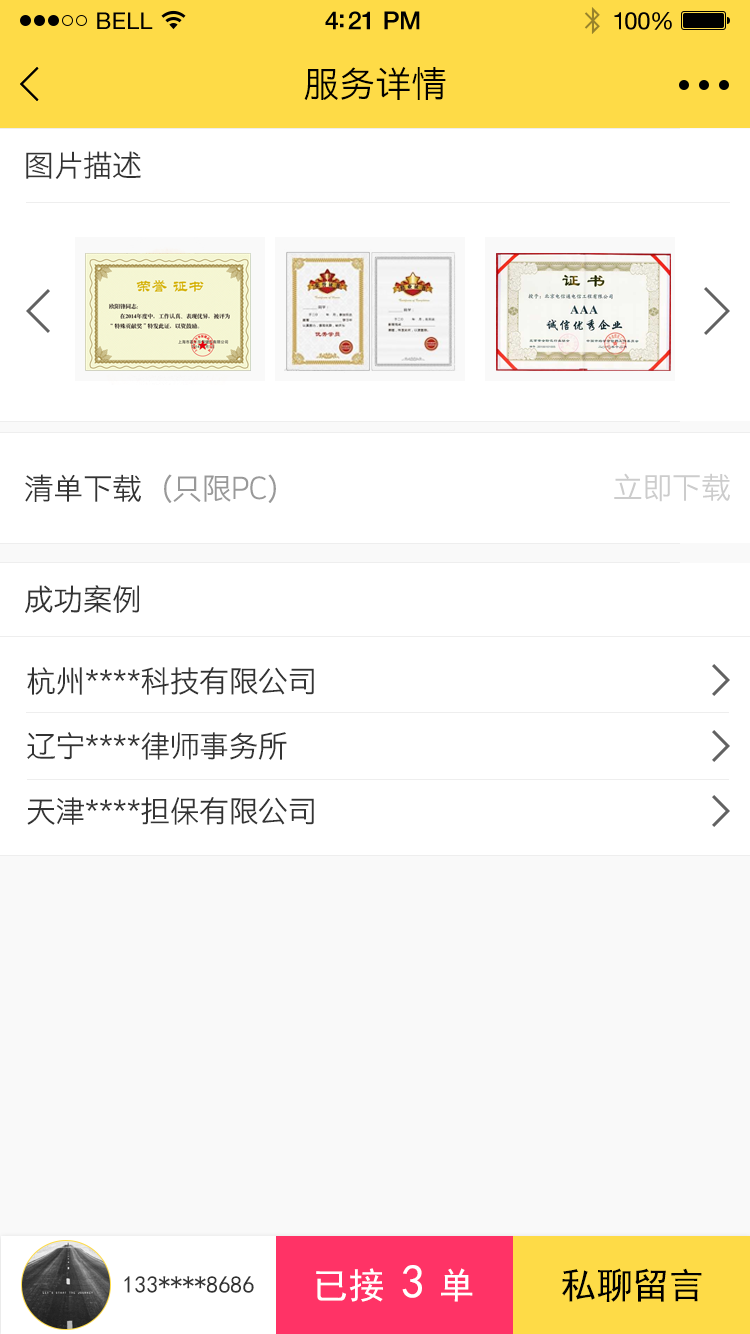
<style>
.page{position:relative;width:750px;height:1334px;background:#ffffff}
.page>*{position:absolute;margin:0}
.t1{font:23px "HelveticaNeue";letter-spacing:0.02em;color:#000000}
.t2{font:25px "HelveticaNeue-Medium";letter-spacing:-0.02em;color:#000000}
.t3{font:24px "HelveticaNeue";letter-spacing:-0.02em;color:#010101}
.t4{font:36px "STHeitiSC-Light";color:#000000}
.t5{font:30px "STHeitiSC-Light";letter-spacing:-0.02em;color:#333333}
.t6{font:30px "STHeitiSC-Light";letter-spacing:-0.02em;color:#cccccc}
.t7{font:30px "STHeitiSC-Light";letter-spacing:-0.02em;color:#999999}
.t8{font:48px "SimHei";color:#ffffff}
.t9{font:24px "SimHei";color:#333333}
.t10{font:36px "SimHei";color:#ffffff}
.t11{font:36px "SimHei";color:#000000}
</style>
<div class="page">
<p class="t1" style="left:97px;top:12px;width:56px;height:17px">BELL</p>
<p class="t1" style="left:97px;top:12px;width:56px;height:17px">BELL</p>
<p class="t2" style="left:325px;top:11px;width:95px;height:19px">4:21 PM</p>
<p class="t2" style="left:325px;top:11px;width:95px;height:19px">4:21 PM</p>
<p class="t3" style="left:614px;top:12px;width:58px;height:18px">100%</p>
<p class="t3" style="left:614px;top:12px;width:58px;height:18px">100%</p>
<p class="t4" style="left:304px;top:67px;width:142px;height:33px">服务详情</p>
<p class="t5" style="left:26px;top:151px;width:115px;height:28px">图片描述</p>
<p class="t6" style="left:614px;top:473px;width:116px;height:29px">立即下载</p>
<p class="t7" style="left:25px;top:474px;width:251px;height:29px"><span class="t5">清单下载   </span>（只限PC）</p>
<p class="t5" style="left:25px;top:585px;width:114px;height:28px">成功案例</p>
<p class="t5" style="left:27px;top:667px;width:287px;height:28px">杭州****科技有限公司</p>
<p class="t5" style="left:27px;top:732px;width:260px;height:28px">辽宁****律师事务所</p>
<p class="t5" style="left:27px;top:797px;width:287px;height:28px">天津****担保有限公司</p>
<p class="t8" style="left:402px;top:1265px;width:20px;height:33px">3</p>
<p class="t9" style="left:124px;top:1276px;width:130px;height:17px">133****8686</p>
<p class="t10" style="left:316px;top:1268px;width:157px;height:34px">已接   单</p>
<p class="t11" style="left:562px;top:1268px;width:140px;height:34px">私聊留言</p>
</div>
